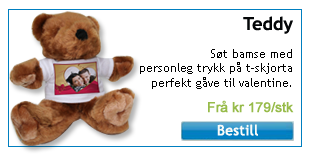
<style>
.page{position:relative;width:309px;height:155px;background:#ffffff}
.page>*{position:absolute;margin:0}
.t1{font:18px "TrebuchetMS-Bold";color:#040608}
.t2{font:12px "TrebuchetMS";color:#000000}
.t3{font:14px "ArialMT";letter-spacing:-0.025em;color:#97bb4a;font-weight:bold}
.t4{font:14px "TrebuchetMS";color:#fafbf8;font-weight:bold}
</style>
<div class="page">
<p class="t1" style="left:243px;top:16px;width:50px;height:18px">Teddy</p>
<p class="t2" style="left:140px;top:49px;width:152px;height:40px;text-align:right">Søt bamse med<br>personleg trykk på t-skjorta<br>perfekt gåve til valentine.</p>
<p class="t3" style="left:208px;top:100px;width:86px;height:13px">Frå kr 179/stk</p>
<p class="t4" style="left:217px;top:124px;width:41px;height:12px">Bestill</p>
</div>
